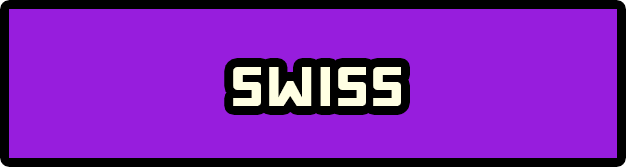
<style>
.page{position:relative;width:626px;height:167px;background:#971ddd}
.page>*{position:absolute;margin:0}
.t1{font:90px "ONRAMP";color:#ffffe3}
</style>
<div class="page">
<p class="t1" style="left:233px;top:67px;width:168px;height:39px">swiss</p>
</div>
